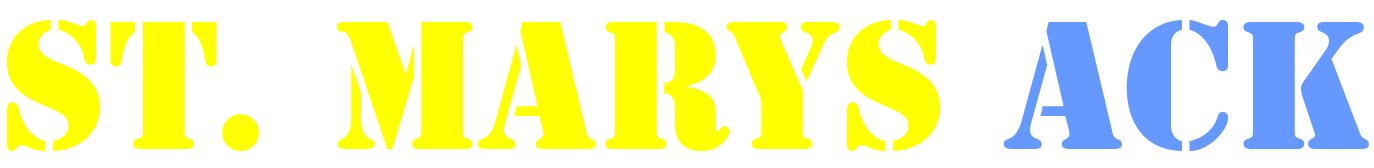
<style>
.page{position:relative;width:1374px;height:168px;background:#ffffff}
.page>*{position:absolute;margin:0}
.t1{font:170px "StencilStd";color:#ffff00}
.t2{font:170px "StencilStd";color:#6599ff}
</style>
<div class="page">
<p class="t1" style="left:7px;top:20px;width:1362px;height:131px">ST. MARYS <span class="t2">ACK</span></p>
</div>
